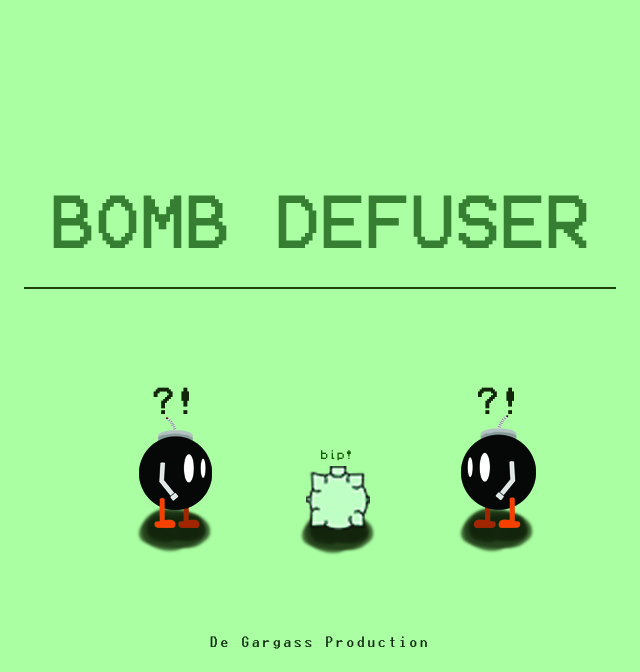
<style>
.page{position:relative;width:640px;height:672px;background:#aaffa3}
.page>*{position:absolute;margin:0}
.t1{font:60px "Terminal";color:#357e31}
.t2{font:24px "Terminal";color:#357e31}
.t3{font:30px "Terminal";color:#12240c}
.t4{font:11px "Terminal";color:#145c00}
.t5{font:14px "Terminal";color:#122611}
</style>
<div class="page">
<p class="t1" style="left:53px;top:195px;width:534px;height:53px"><span class="t2"><br><br><br><br></span>BOMB DEFUSER</p>
<p class="t3" style="left:153px;top:387px;width:36px;height:27px">?!</p>
<p class="t3" style="left:478px;top:387px;width:36px;height:27px">?!</p>
<p class="t4" style="left:321px;top:450px;width:30px;height:11px">bip!</p>
<p class="t5" style="left:210px;top:636px;width:217px;height:13px">De Gargass Production</p>
</div>
